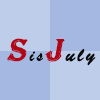
<style>
.page{position:relative;width:100px;height:100px;background:#a4b8e1}
.page>*{position:absolute;margin:0}
.t1{font:19.2px "BrushScriptStd";letter-spacing:0.11em;color:#0a0a0a;font-weight:bold}
.t2{font:32px "Algerian";letter-spacing:0.11em;color:#b10414;font-weight:bold;font-style:italic}
.t3{font:19.2px "BrushScriptMT";letter-spacing:0.11em;color:#0a0a0a;font-weight:bold}
</style>
<div class="page">
<p class="t1" style="left:7px;top:38px;width:89px;height:28px"><span class="t2">S</span><span class="t3">is</span><span class="t2">J</span>uly</p>
</div>
